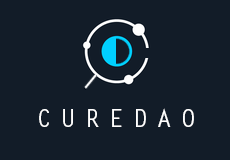
<style>
.page{position:relative;width:230px;height:160px;background:#121c28}
.page>*{position:absolute;margin:0}
.t1{font:24px "LetterGothicStd-Bold";letter-spacing:0.4em;color:#ffffff}
</style>
<div class="page">
<p class="t1" style="left:39px;top:108px;width:155px;height:19px">CUREDAO</p>
</div>
